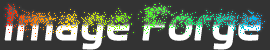
<style>
.page{position:relative;width:270px;height:50px;background:#333333}
.page>*{position:absolute;margin:0}
.t1{font:42px "DingTalk-JinBuTi";font-weight:bold}
</style>
<div class="page">
<p class="t1" style="left:4px;top:7px;width:257px;height:43px">Image Forge</p>
</div>
